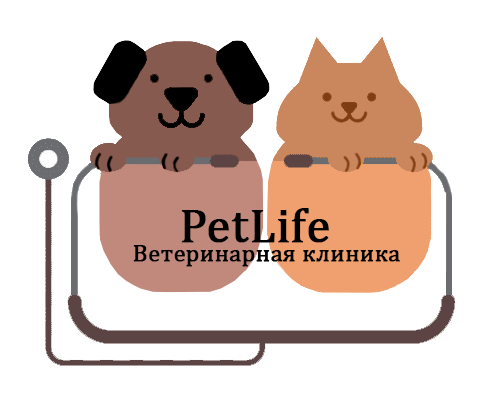
<style>
.page{position:relative;width:502px;height:410px;background:#ffffff}
.page>*{position:absolute;margin:0}
.t1{font:24px "CambriaMath";color:#000000;font-weight:bold}
</style>
<div class="page">
<p class="t1" style="left:133px;top:245px;width:267px;height:22px">Ветеринарная клиника</p>
</div>
